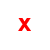
<style>
.page{position:relative;width:50px;height:50px;background:#ffffff}
.page>*{position:absolute;margin:0}
.t1{font:24px "Arial-BoldMT";letter-spacing:0.02em;color:#fe0000}
</style>
<div class="page">
<p class="t1" style="left:18px;top:18px;width:13px;height:13px">x</p>
</div>
